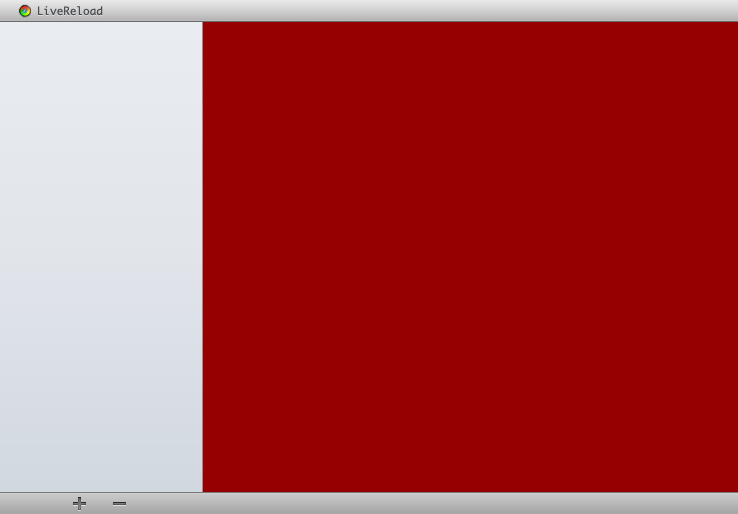
<style>
.page{position:relative;width:738px;height:514px;background:#960000}
.page>*{position:absolute;margin:0}
.t1{font:11px "Monaco";color:#4b4e51}
</style>
<div class="page">
<p class="t1" style="left:38px;top:6px;width:65px;height:10px">LiveReload</p>
</div>
